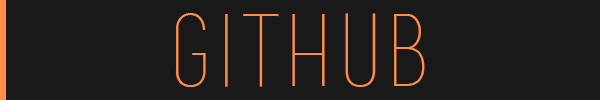
<style>
.page{position:relative;width:600px;height:100px;background:#191919}
.page>*{position:absolute;margin:0}
.t1{font:100px "basictitlefont";color:#ff8c47}
</style>
<div class="page">
<p class="t1" style="left:175px;top:13px;width:250px;height:74px">Github</p>
</div>
